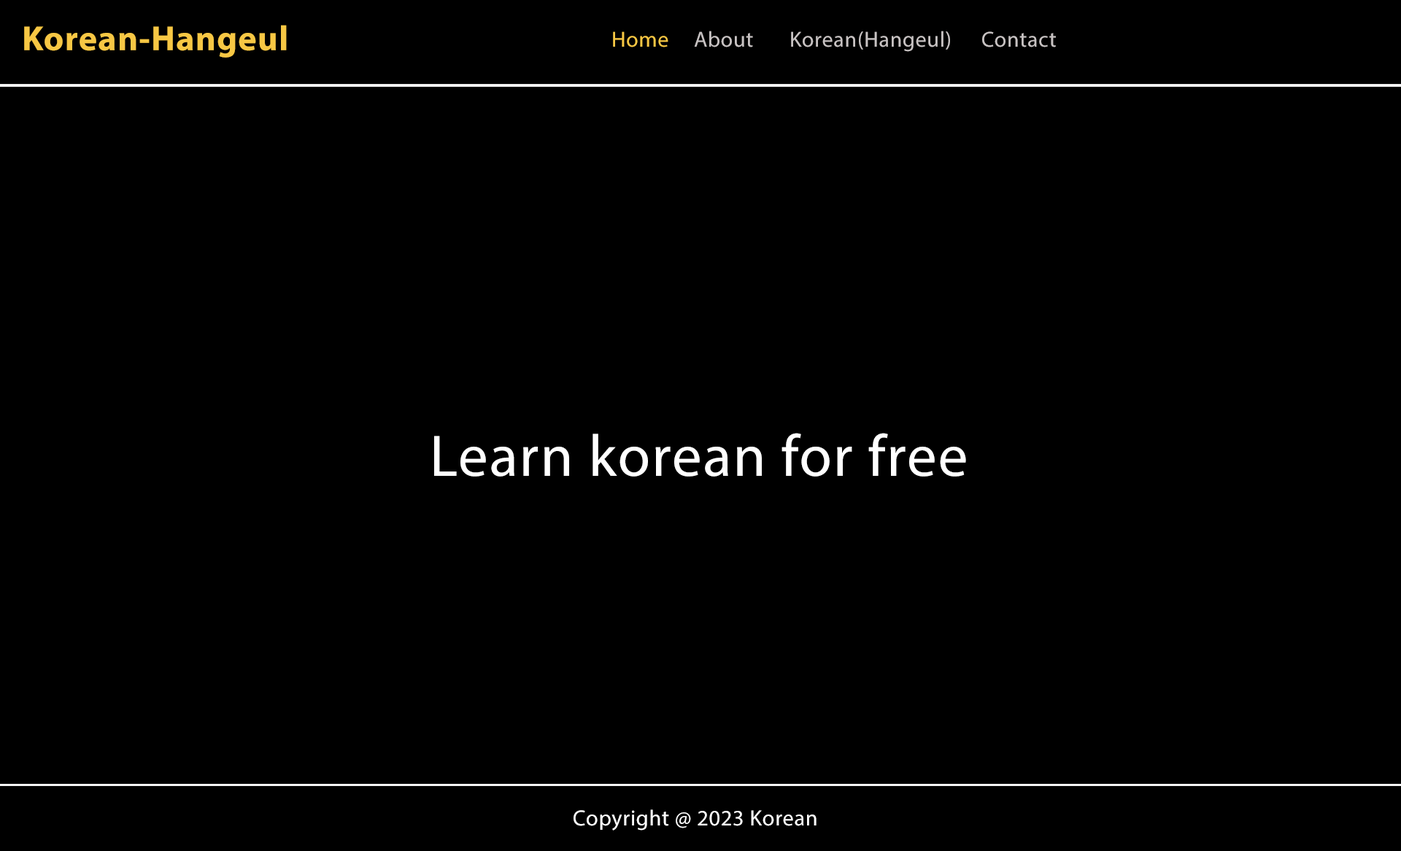
<style>
.page{position:relative;width:1401px;height:851px;background:#000000}
.page>*{position:absolute;margin:0}
.t1{font:35px "MyriadPro-Bold";letter-spacing:0.025em;color:#f7c744}
.t2{font:21.9px "MyriadPro-Regular";letter-spacing:0.025em;color:#f7c744}
.t3{font:21.9px "MyriadPro-Regular";letter-spacing:0.025em;color:#c7c2c2}
.t4{font:59.1px "MyriadPro-Regular";letter-spacing:0.025em;color:#ffffff}
.t5{font:22.1px "MyriadPro-Regular";letter-spacing:0.025em;color:#ffffff}
</style>
<div class="page">
<p class="t1" style="left:24px;top:25px;width:263px;height:33px">Korean-Hangeul</p>
<p class="t2" style="left:613px;top:31px;width:56px;height:16px">Home</p>
<p class="t3" style="left:694px;top:31px;width:59px;height:16px">About</p>
<p class="t3" style="left:791px;top:31px;width:159px;height:21px">Korean(Hangeul)</p>
<p class="t3" style="left:982px;top:31px;width:74px;height:16px">Contact</p>
<p class="t4" style="left:434px;top:433px;width:532px;height:44px">Learn korean for free</p>
<p class="t5" style="left:574px;top:809px;width:243px;height:22px">Copyright @ 2023 Korean</p>
</div>
